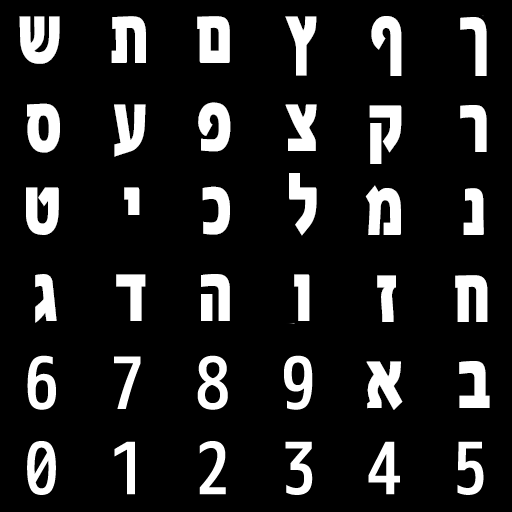
<style>
.page{position:relative;width:512px;height:512px;background:#000000}
.page>*{position:absolute;margin:0}
.t1{font:97px "FbAlbatros-Black";color:#ffffff;scale:0.68 1}
</style>
<div class="page">
<p class="t1" style="left:19px;top:16px;width:41px;height:48px">ש</p>
<p class="t1" style="left:111px;top:16px;width:35px;height:47px">ת</p>
<p class="t1" style="left:197px;top:16px;width:33px;height:47px">ם</p>
<p class="t1" style="left:285px;top:16px;width:32px;height:60px">ץ</p>
<p class="t1" style="left:371px;top:16px;width:31px;height:60px">ף</p>
<p class="t1" style="left:460px;top:17px;width:27px;height:59px">ך</p>
<p class="t1" style="left:198px;top:102px;width:33px;height:50px">פ</p>
<p class="t1" style="left:27px;top:103px;width:33px;height:50px">ס</p>
<p class="t1" style="left:114px;top:104px;width:32px;height:53px">ע</p>
<p class="t1" style="left:285px;top:104px;width:32px;height:47px">צ</p>
<p class="t1" style="left:369px;top:105px;width:33px;height:59px">ק</p>
<p class="t1" style="left:460px;top:105px;width:27px;height:47px">ר</p>
<p class="t1" style="left:289px;top:173px;width:28px;height:63px">ל</p>
<p class="t1" style="left:365px;top:185px;width:36px;height:50px">מ</p>
<p class="t1" style="left:26px;top:187px;width:33px;height:48px">ט</p>
<p class="t1" style="left:124px;top:187px;width:16px;height:28px">י</p>
<p class="t1" style="left:202px;top:186px;width:28px;height:49px">כ</p>
<p class="t1" style="left:463px;top:188px;width:21px;height:47px">נ</p>
<p class="t1" style="left:35px;top:274px;width:22px;height:49px">ג</p>
<p class="t1" style="left:116px;top:274px;width:30px;height:47px">ד</p>
<p class="t1" style="left:201px;top:274px;width:29px;height:47px">ה</p>
<p class="t1" style="left:294px;top:274px;width:16px;height:47px">ו</p>
<p class="t1" style="left:377px;top:275px;width:19px;height:47px">ז</p>
<p class="t1" style="left:455px;top:275px;width:33px;height:47px">ח</p>
<p class="t1" style="left:366px;top:361px;width:37px;height:49px">א</p>
<p class="t1" style="left:459px;top:361px;width:31px;height:47px">ב</p>
</div>
